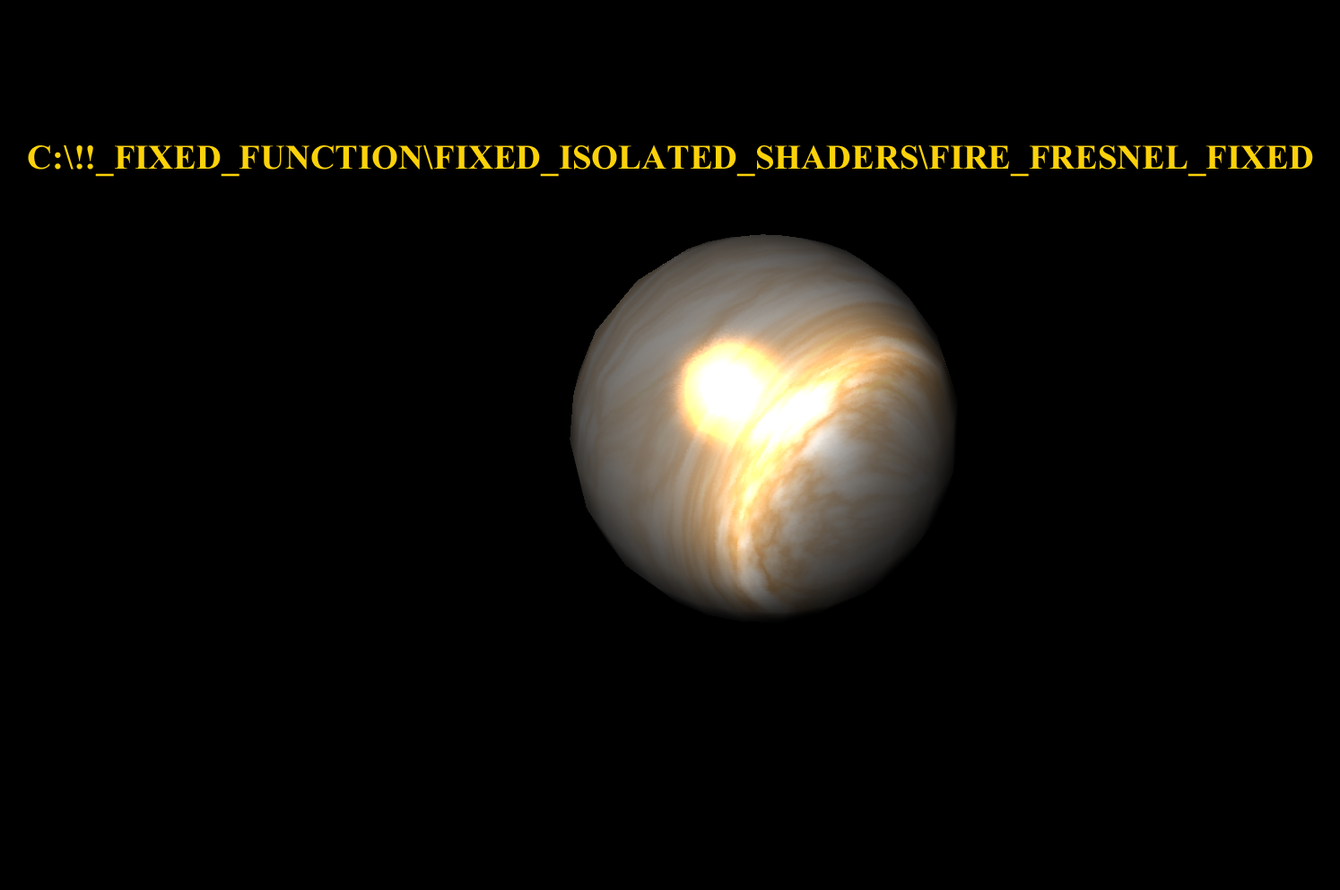
<style>
.page{position:relative;width:1340px;height:890px;background:#000000}
.page>*{position:absolute;margin:0}
.t1{font:43.1px "Aparajita-Bold";color:#fbd20a}
</style>
<div class="page">
<p class="t1" style="left:28px;top:145px;width:1285px;height:32px">C:\!!_FIXED_FUNCTION\FIXED_ISOLATED_SHADERS\FIRE_FRESNEL_FIXED</p>
</div>
